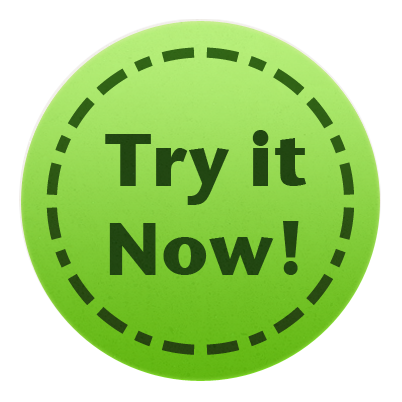
<style>
.page{position:relative;width:402px;height:402px;background:#ffffff}
.page>*{position:absolute;margin:0}
.t1{font:74.1px "StoneSansITC-Bold";color:#214612}
</style>
<div class="page">
<p class="t1" style="left:105px;top:130px;width:201px;height:145px;text-align:center">Try it<br>Now!</p>
</div>
